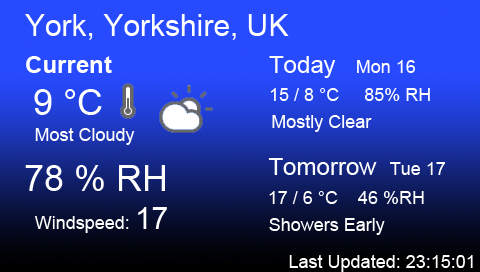
<style>
.page{position:relative;width:480px;height:272px}
.page>*{position:absolute;margin:0}
.t1{font:30px "ArialMT";color:#ffffff}
.t2{font:24px "Arial-BoldMT";color:#ffffff}
.t3{font:18px "ArialMT";color:#ffffff}
.t4{font:24px "ArialMT";color:#ffffff}
.t5{font:36px "ArialMT";color:#ffffff}
</style>
<div class="page">
<p class="t1" style="left:25px;top:14px;width:264px;height:26px">York, Yorkshire, UK</p>
<p class="t2" style="left:26px;top:56px;width:86px;height:17px">Current</p>
<p class="t3" style="left:269px;top:56px;width:146px;height:22px"><span class="t4">Today   </span>Mon 16</p>
<p class="t5" style="left:34px;top:89px;width:68px;height:26px">9 °C</p>
<p class="t3" style="left:270px;top:88px;width:160px;height:13px">15 / 8 °C     85% RH</p>
<p class="t3" style="left:272px;top:115px;width:100px;height:17px">Mostly Clear</p>
<p class="t3" style="left:35px;top:128px;width:100px;height:17px">Most Cloudy</p>
<p class="t4" style="left:268px;top:158px;width:177px;height:17px">Tomorrow  <span class="t3">Tue 17</span></p>
<p class="t5" style="left:25px;top:165px;width:140px;height:26px">78 % RH</p>
<p class="t3" style="left:269px;top:191px;width:155px;height:13px">17 / 6 °C    46 %RH</p>
<p class="t3" style="left:35px;top:207px;width:132px;height:26px">Windspeed: <span class="t1">17</span></p>
<p class="t3" style="left:269px;top:218px;width:116px;height:17px">Showers Early</p>
<p class="t3" style="left:289px;top:255px;width:184px;height:17px">Last Updated: 23:15:01</p>
</div>
